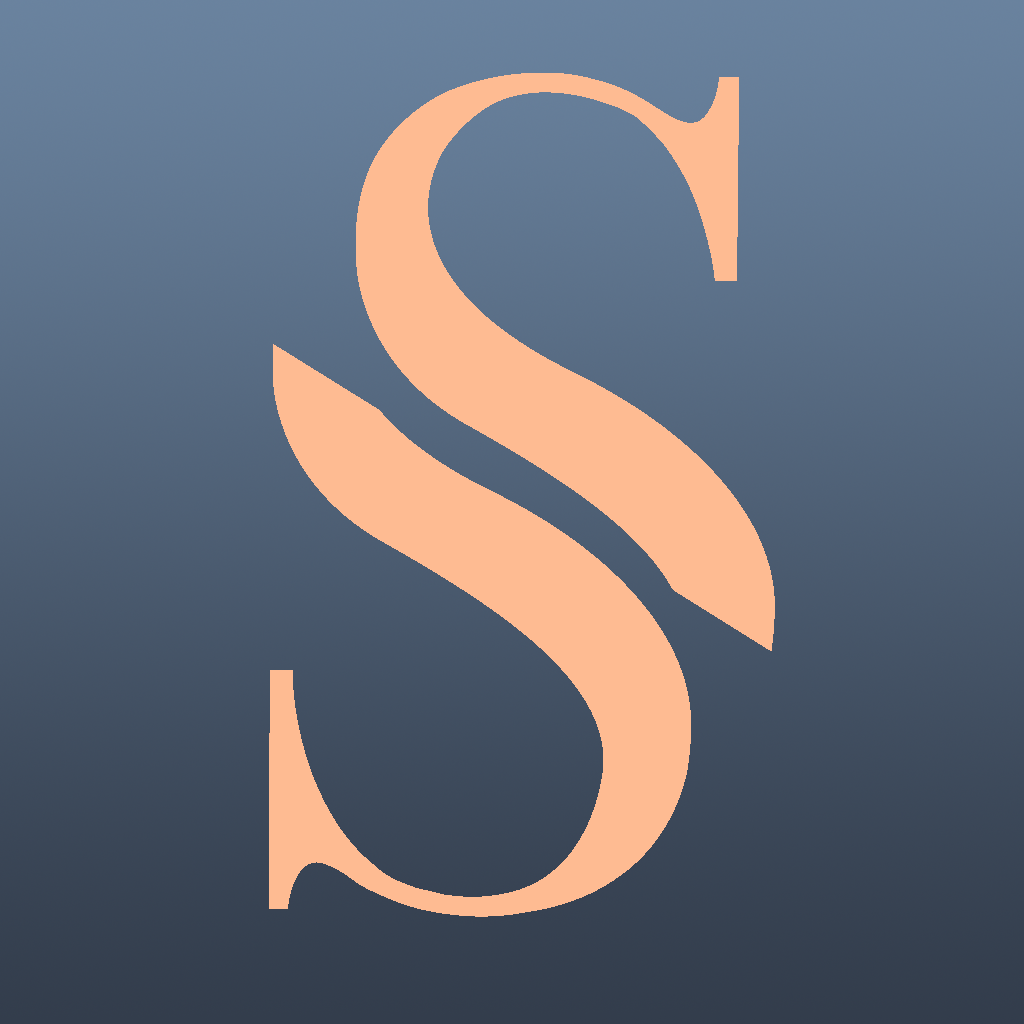
<style>
.page{position:relative;width:1024px;height:1024px}
.page>*{position:absolute;margin:0}
.t1{font:1111.1px "Exodus-PersonalUse-Striped";color:#febb92}
</style>
<div class="page">
<p class="t1" style="left:269px;top:73px;width:506px;height:844px">S</p>
</div>
